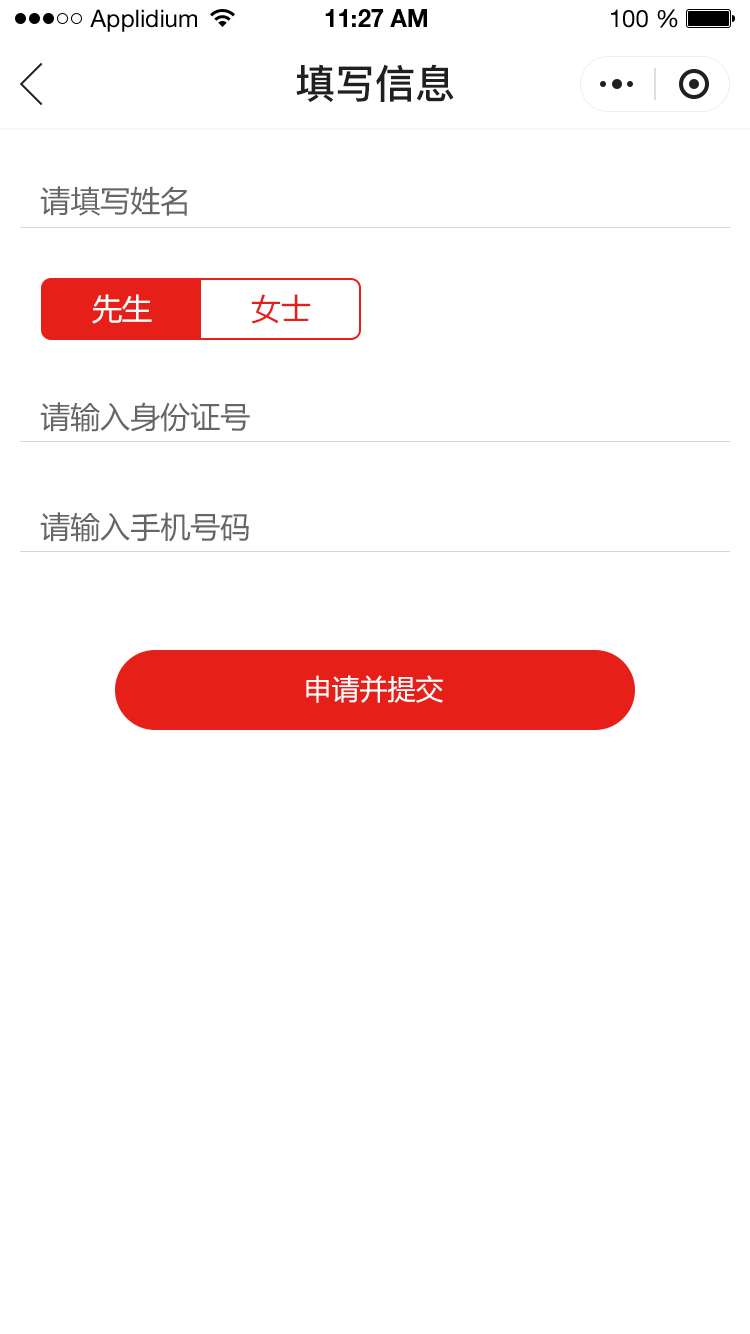
<style>
.page{position:relative;width:750px;height:1334px;background:#ffffff}
.page>*{position:absolute;margin:0}
.t1{font:24px "HelveticaNeueLTStd-Roman";color:#000000}
.t2{font:24px "HelveticaNeueLTStd-Bd";color:#000000}
.t3{font:40px "PingFang-SC-Bold";color:#202020;text-transform:uppercase}
.t4{font:30px "MicrosoftYaHei";color:#666666;text-transform:uppercase}
.t5{font:30px "MicrosoftYaHei";color:#ffffff;text-transform:uppercase}
.t6{font:30px "MicrosoftYaHei";color:#e61f18;text-transform:uppercase}
.t7{font:28px "MicrosoftYaHei";color:#ffffff;text-transform:uppercase}
</style>
<div class="page">
<p class="t1" style="left:90px;top:9px;width:107px;height:23px">Applidium</p>
<p class="t2" style="left:325px;top:9px;width:102px;height:18px">11:27 AM</p>
<p class="t1" style="left:611px;top:9px;width:67px;height:19px">100 %</p>
<p class="t3" style="left:296px;top:64px;width:158px;height:38px">填写信息</p>
<p class="t4" style="left:40px;top:186px;width:147px;height:30px">请填写姓名</p>
<p class="t5" style="left:92px;top:294px;width:60px;height:30px">先生</p>
<p class="t6" style="left:251px;top:294px;width:60px;height:30px">女士</p>
<p class="t4" style="left:40px;top:402px;width:210px;height:30px">请输入身份证号</p>
<p class="t4" style="left:40px;top:512px;width:209px;height:30px">请输入手机号码</p>
<p class="t7" style="left:306px;top:675px;width:137px;height:28px">申请并提交</p>
</div>
